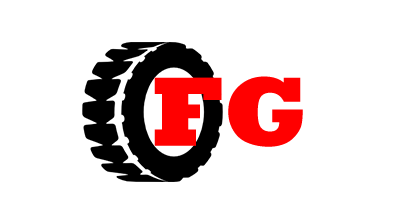
<style>
.page{position:relative;width:400px;height:220px;background:#ffffff}
.page>*{position:absolute;margin:0}
.t1{font:100px "Rockwell-ExtraBold";letter-spacing:0.005em;color:#ff0000}
</style>
<div class="page">
<p class="t1" style="left:154px;top:76px;width:149px;height:71px">FG</p>
</div>
